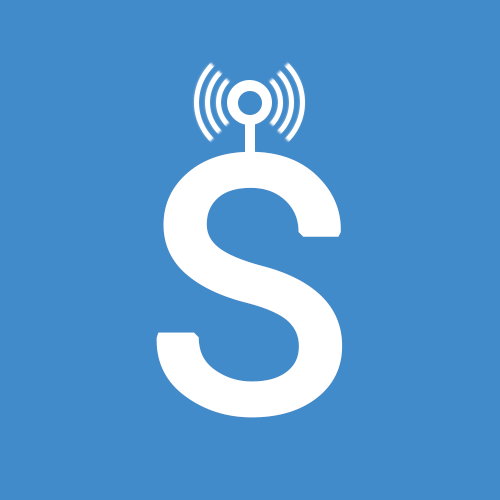
<style>
.page{position:relative;width:500px;height:500px;background:#428bca}
.page>*{position:absolute;margin:0}
.t1{font:350px "Roboto-Regular";color:#ffffff;font-weight:bold}
</style>
<div class="page">
<p class="t1" style="left:156px;top:151px;width:187px;height:267px">S</p>
</div>
